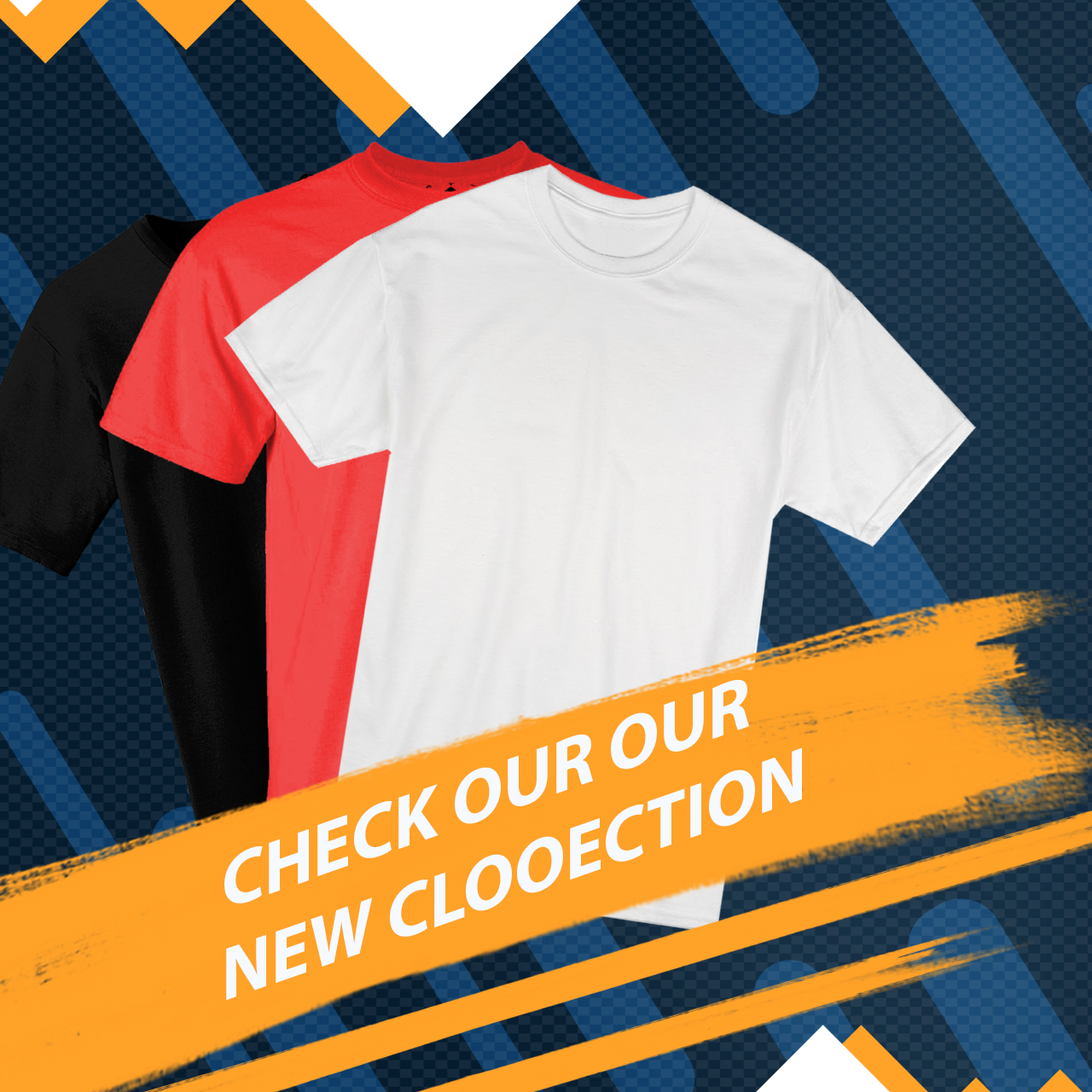
<style>
.page{position:relative;width:1092px;height:1092px}
.page>*{position:absolute;margin:0}
.t1{font:76px "MyriadPro-Bold";color:#f6faff}
</style>
<div class="page">
<p class="t1" style="left:224px;top:679px;width:578px;height:322px;rotate:-19deg">CHECK OUR OUR<br>NEW CLOOECTION</p>
</div>
